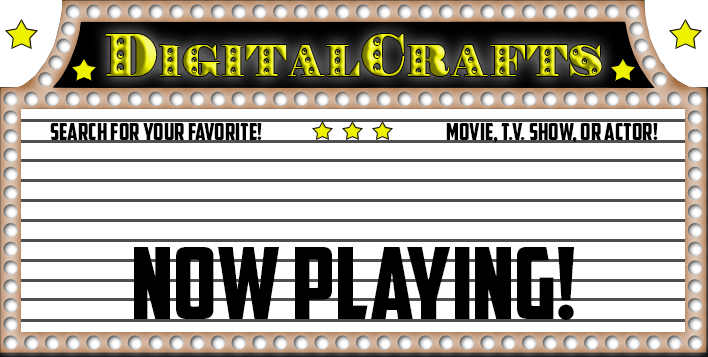
<style>
.page{position:relative;width:708px;height:357px;background:#ffffff}
.page>*{position:absolute;margin:0}
.t1{font:60px "Rechnung-Regular"}
.t2{font:24px "AmericanCaptain";color:#000000}
.t3{font:100px "AmericanCaptain";color:#000000}
</style>
<div class="page">
<p class="t1" style="left:105px;top:34px;width:497px;height:42px">DigitalCrafts</p>
<p class="t2" style="left:50px;top:123px;width:212px;height:17px">SEARCH FOR YOUR FAVORITE!</p>
<p class="t2" style="left:446px;top:123px;width:212px;height:19px">MOVIE, T.V. SHOW, OR ACTOR!</p>
<p class="t3" style="left:134px;top:247px;width:440px;height:73px">now playing!</p>
</div>
